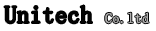
<style>
.page{position:relative;width:156px;height:31px;background:#ffffff}
.page>*{position:absolute;margin:0}
.t1{font:24px "SimSun";color:#030303;font-weight:bold}
.t2{font:14px "SimSun";color:#adacac;font-weight:bold}
</style>
<div class="page">
<p class="t1" style="left:4px;top:5px;width:145px;height:19px">Unitech <span class="t2">Co.ltd</span></p>
</div>
